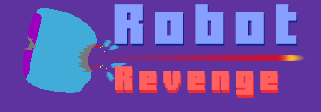
<style>
.page{position:relative;width:321px;height:112px;background:#5e339f}
.page>*{position:absolute;margin:0}
.t1{font:40px "MinercraftoryRegular";letter-spacing:0.2em;color:#87a0ff;font-weight:bold}
.t2{font:24px "MinercraftoryRegular";letter-spacing:0.2em;color:#ff6060;font-weight:bold}
</style>
<div class="page">
<p class="t1" style="left:114px;top:4px;width:183px;height:40px">Robot</p>
<p class="t1" style="left:115px;top:6px;width:183px;height:40px">Robot</p>
<p class="t2" style="left:115px;top:66px;width:163px;height:29px">Revenge</p>
<p class="t2" style="left:116px;top:69px;width:163px;height:29px">Revenge</p>
</div>
